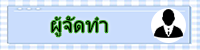
<style>
.page{position:relative;width:200px;height:50px;background:#caddfd}
.page>*{position:absolute;margin:0}
.t1{font:20px "Tahoma";color:#000000}
</style>
<div class="page">
<p class="t1" style="left:51px;top:16px;width:57px;height:21px">ผู้จัดทำ</p>
</div>
